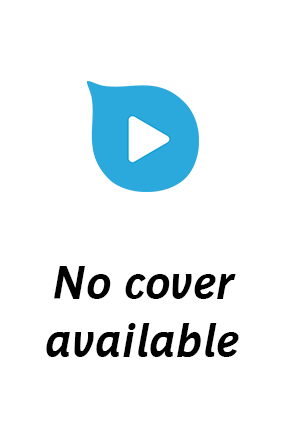
<style>
.page{position:relative;width:286px;height:432px;background:#ffffff}
.page>*{position:absolute;margin:0}
.t1{font:48px "HendersonBCGSans-BoldItalic";color:#000000}
.t2{font:48px "HendersonBCGSans-Italic";color:#000000}
</style>
<div class="page">
<p class="t1" style="left:46px;top:266px;width:193px;height:91px;text-align:center"><span class="t2"><br><br><br><br><br><br></span>No cover<br>available</p>
</div>
